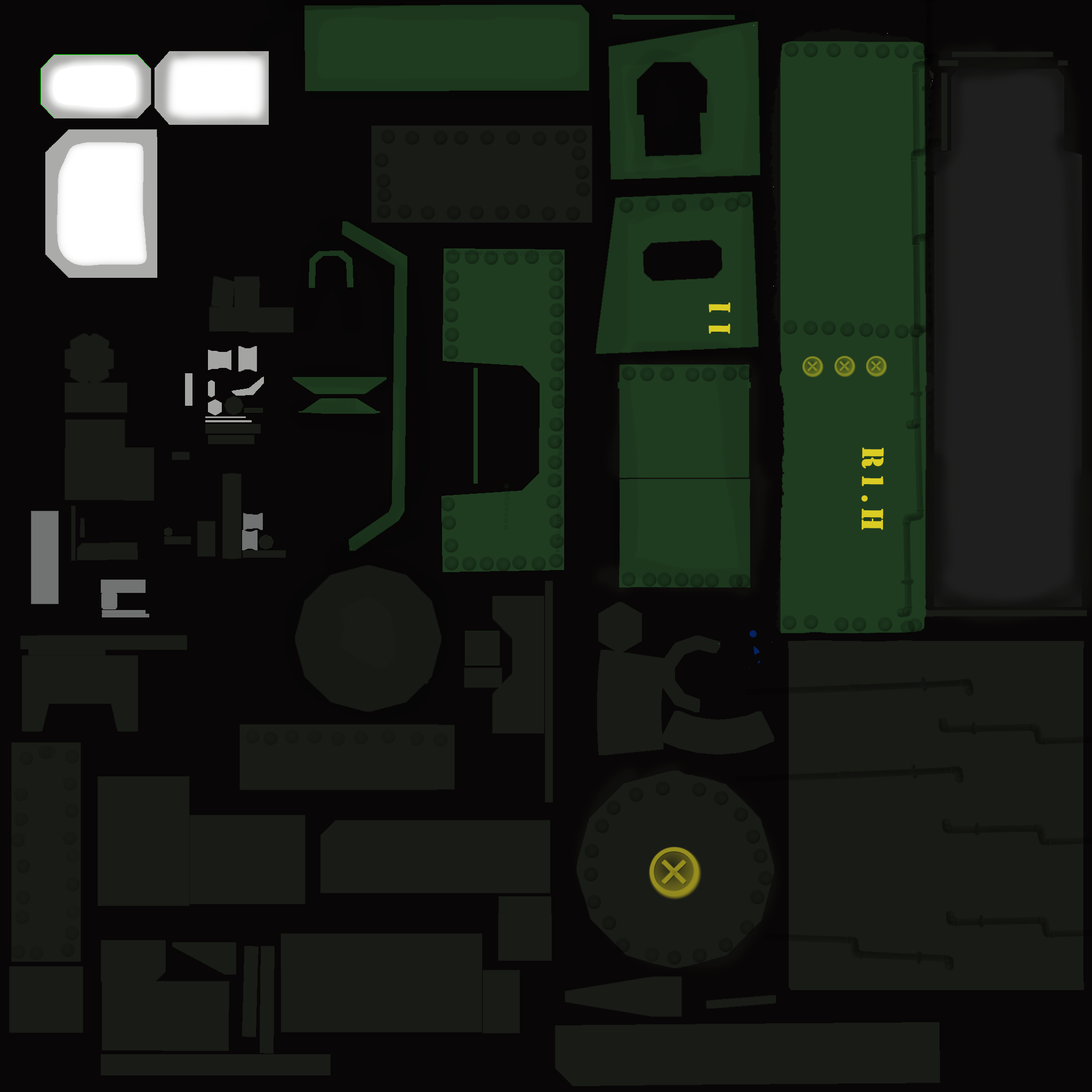
<style>
.page{position:relative;width:1092px;height:1092px;background:#080606}
.page>*{position:absolute;margin:0}
.t1{font:32px "Stencil";letter-spacing:0.1em;color:#dbcc24;text-transform:uppercase}
</style>
<div class="page">
<p class="t1" style="left:709px;top:302px;width:21px;height:32px;rotate:-90deg">111</p>
<p class="t1" style="left:861px;top:447px;width:23px;height:83px;rotate:90deg">r1.H</p>
</div>
